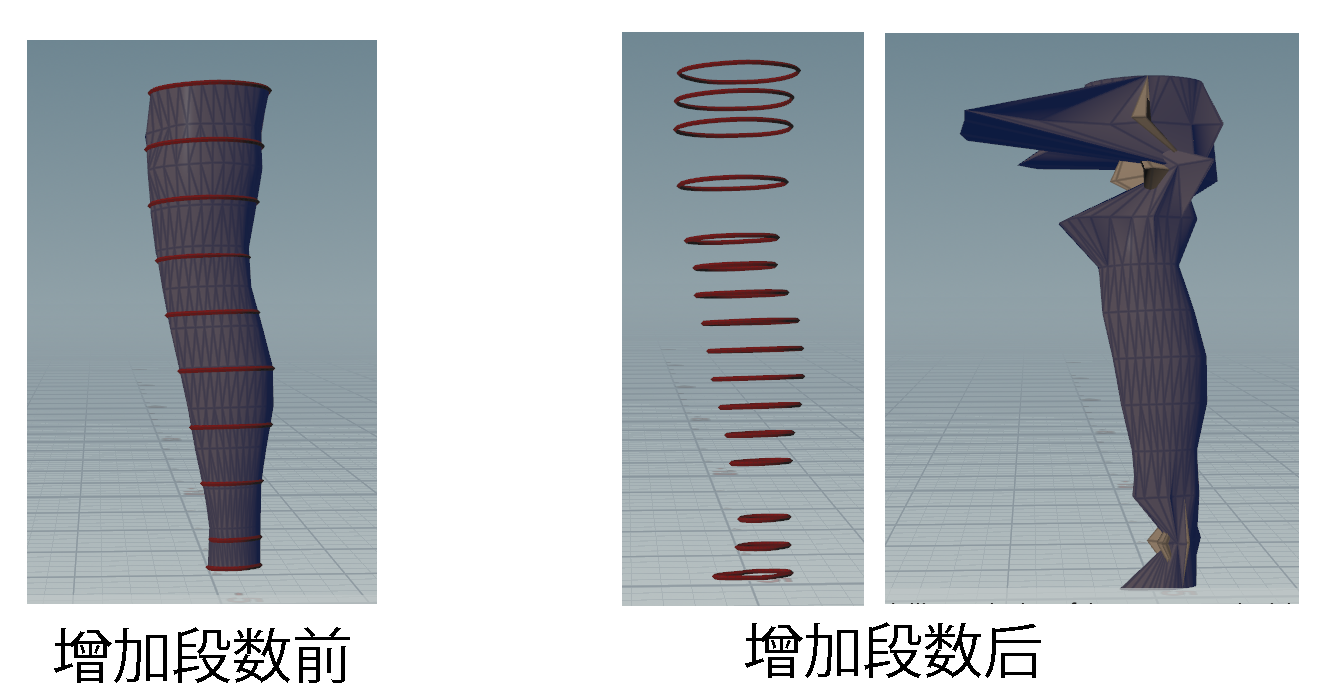
<style>
.page{position:relative;width:1341px;height:698px;background:#ffffff}
.page>*{position:absolute;margin:0}
.t1{font:60px "KozGoPr6N-Regular";color:#000000}
</style>
<div class="page">
<p class="t1" style="left:54px;top:627px;width:296px;height:56px">增加段数前</p>
<p class="t1" style="left:745px;top:622px;width:296px;height:56px">增加段数后</p>
</div>
